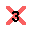
<style>
.page{position:relative;width:32px;height:32px;background:#ffffff}
.page>*{position:absolute;margin:0}
.t1{font:14px "Arial-BoldMT";color:#000000}
</style>
<div class="page">
<p class="t1" style="left:12px;top:11px;width:7px;height:11px">3</p>
</div>
